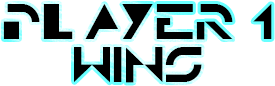
<style>
.page{position:relative;width:275px;height:86px;background:#ffffff}
.page>*{position:absolute;margin:0}
.t1{font:36px "TRON";color:#000000}
</style>
<div class="page">
<p class="t1" style="left:3px;top:4px;width:269px;height:79px;text-align:center">Player 1<br>Wins</p>
</div>
